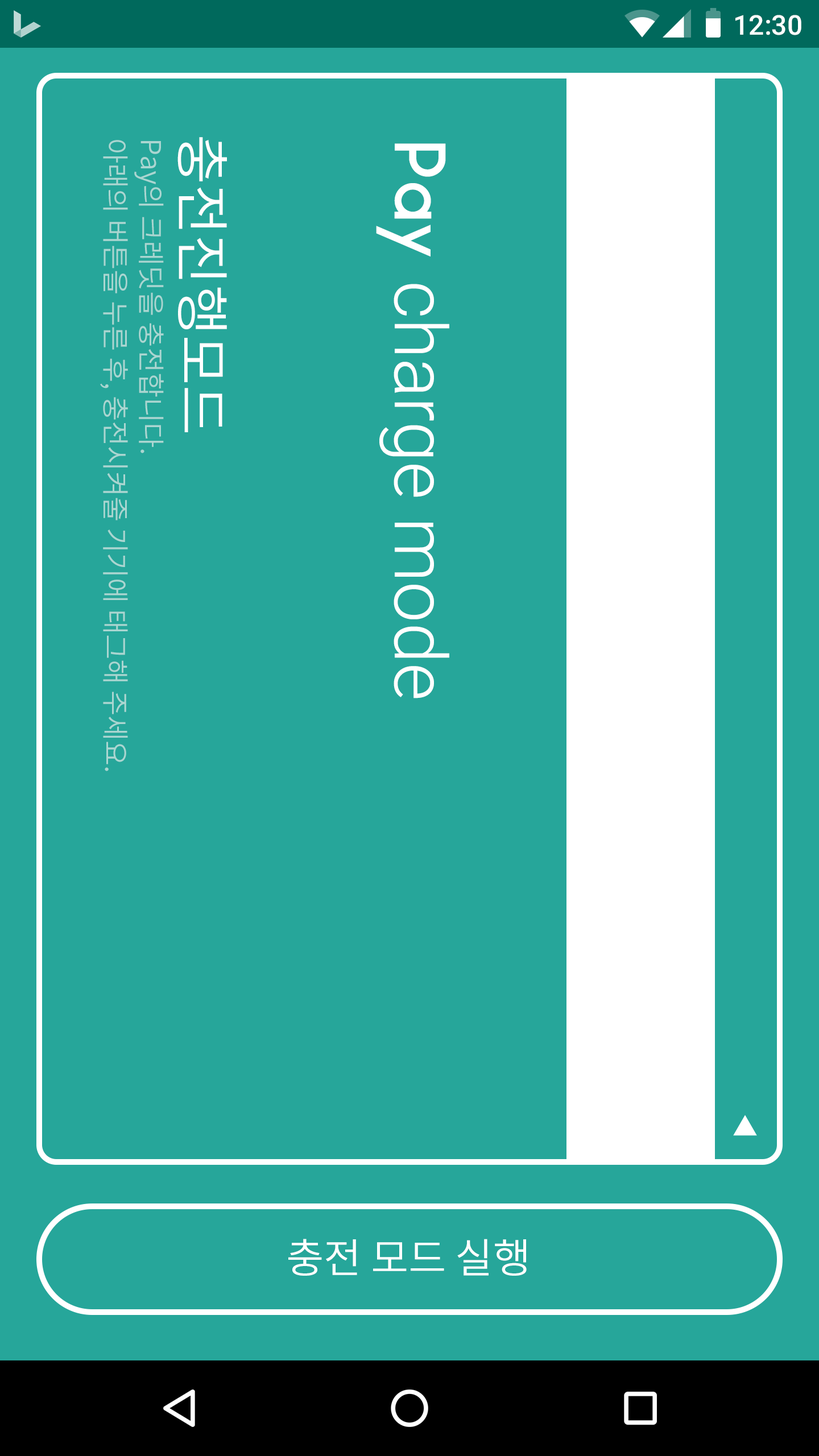
<style>
.page{position:relative;width:819px;height:1456px;background:#26a69a}
.page>*{position:absolute;margin:0}
.t1{font:27.3px "Roboto-Medium";color:#ffffff}
.t2{font:54.6px "NotoSansCJKkr-DemiLight";color:#ffffff}
.t3{font:27.3px "NotoSansCJKkr-DemiLight";color:#aad6d1}
.t4{font:72.8px "Roboto-Light";color:#ffffff}
.t5{font:72.8px "Ikaros";color:#ffffff}
.t6{font:40.9px "NotoSansCJKkr-DemiLight";color:#ffffff}
</style>
<div class="page">
<p class="t1" style="left:735px;top:15px;width:66px;height:20px">12:30</p>
<p class="t2" style="left:177px;top:137px;width:50px;height:295px;rotate:90deg">충전진행모드</p>
<p class="t3" style="left:100px;top:140px;width:28px;height:631px;rotate:90deg">아래의 버튼을 누른 후, 충전시켜줄 기기에 태그해 주세요.</p>
<p class="t3" style="left:134px;top:141px;width:30px;height:312px;rotate:90deg">Pay의 크레딧을 충전합니다.</p>
<p class="t4" style="left:376px;top:143px;width:73px;height:555px;rotate:90deg"><span class="t5">Pay </span>charge mode</p>
<p class="t6" style="left:288px;top:1239px;width:239px;height:37px">충전 모드 실행</p>
</div>
